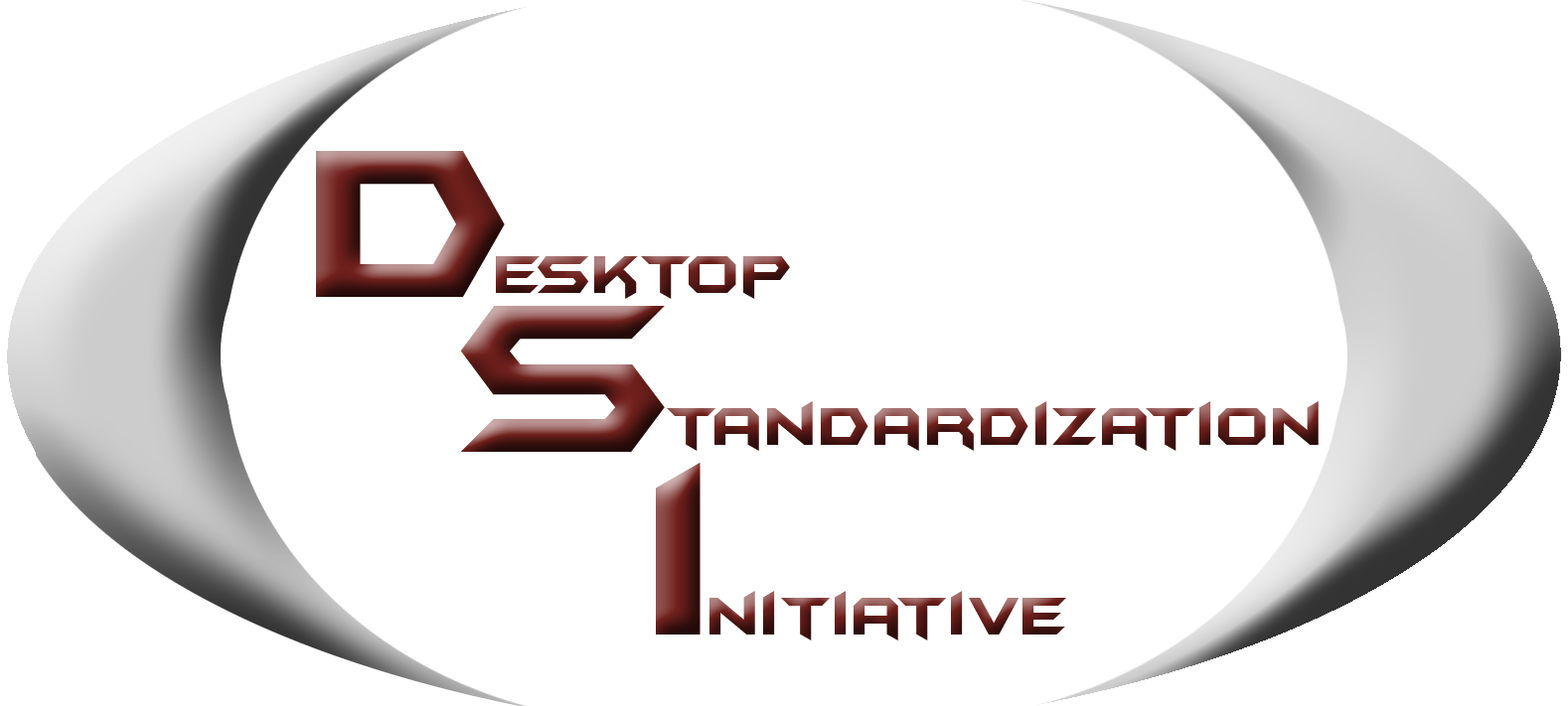
<style>
.page{position:relative;width:1568px;height:706px;background:#ffffff}
.page>*{position:absolute;margin:0}
.t1{font:248.4px "BatmanForeverAlternate";letter-spacing:0.25em}
.t2{font:62.1px "BatmanForeverAlternate"}
</style>
<div class="page">
<p class="t1" style="left:316px;top:151px;width:189px;height:146px">d</p>
<p class="t2" style="left:496px;top:256px;width:294px;height:43px">esktop</p>
<p class="t1" style="left:461px;top:306px;width:204px;height:146px">s</p>
<p class="t2" style="left:667px;top:401px;width:652px;height:50px">tandardization</p>
<p class="t1" style="left:656px;top:463px;width:45px;height:173px">i</p>
<p class="t2" style="left:709px;top:591px;width:357px;height:50px">nitiative</p>
</div>
